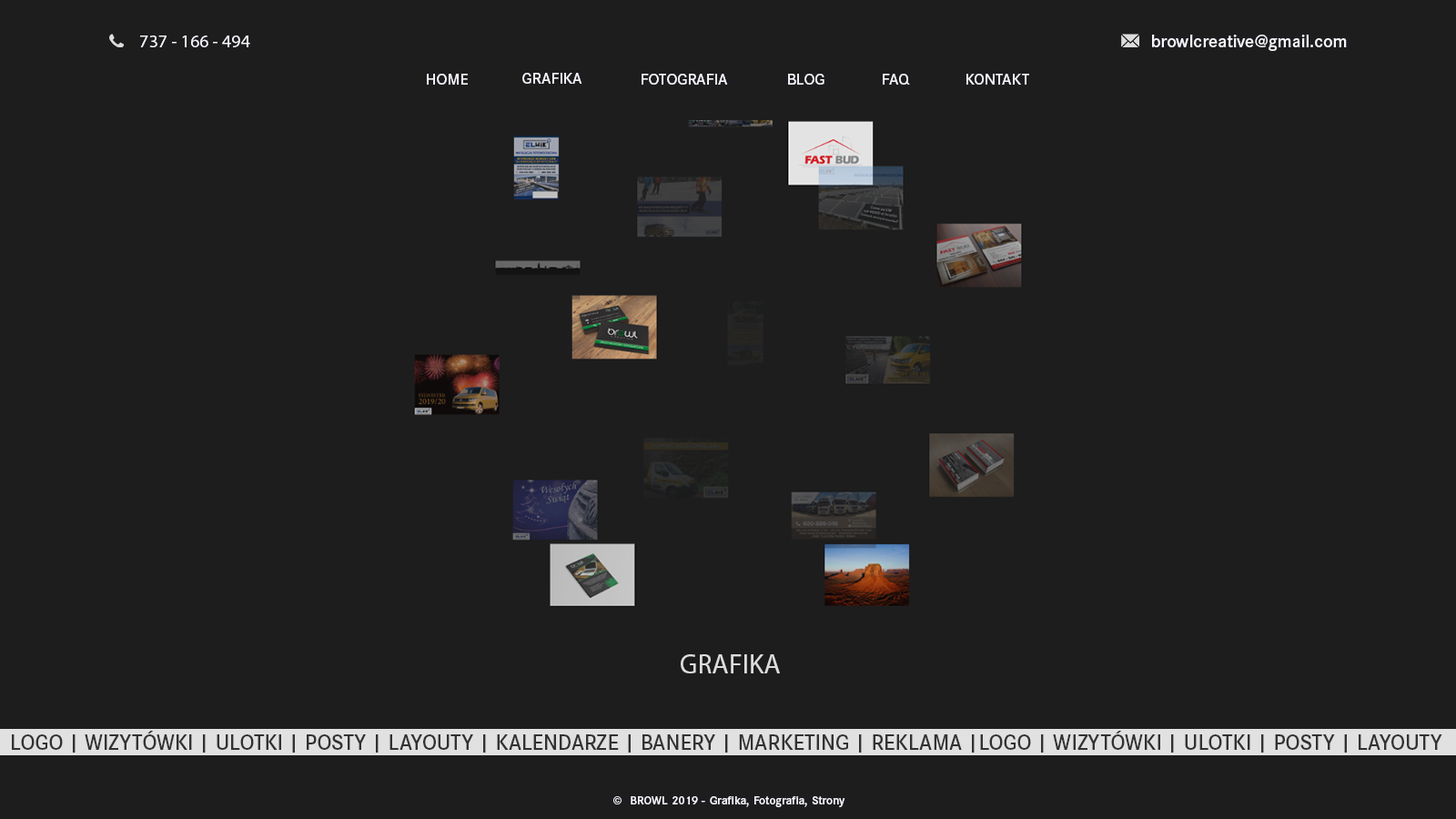
<style>
.page{position:relative;width:1456px;height:819px;background:#1d1d1e}
.page>*{position:absolute;margin:0}
.t1{font:18.2px "MyriadPro-Regular";color:#f7f7ff}
.t2{font:18.2px "CorporateSPro-Demi";color:#f7f7ff}
.t3{font:16.2px "CorporateSPro-Demi";color:#f7f7ff}
.t4{font:27.3px "MyriadPro-Regular";color:#dcdcdc}
.t5{font:21.8px "CorporateSPro-Demi";color:#333132}
.t6{font:12px "CorporateSPro-Demi";color:#f7f7ff}
</style>
<div class="page">
<p class="t1" style="left:140px;top:35px;width:110px;height:12px">737 - 166 - 494</p>
<p class="t2" style="left:1152px;top:35px;width:195px;height:16px">browlcreative@gmail.com</p>
<p class="t3" style="left:427px;top:74px;width:41px;height:11px;text-align:justify">HOME<br>v</p>
<p class="t3" style="left:522px;top:73px;width:60px;height:11px">GRAFIKA</p>
<p class="t3" style="left:642px;top:74px;width:86px;height:11px">FOTOGRAFIA</p>
<p class="t3" style="left:788px;top:74px;width:36px;height:11px">BLOG</p>
<p class="t3" style="left:883px;top:74px;width:27px;height:11px">FAQ</p>
<p class="t3" style="left:966px;top:74px;width:63px;height:11px">KONTAKT</p>
<p class="t4" style="left:681px;top:654px;width:99px;height:19px">GRAFIKA</p>
<p class="t5" style="left:12px;top:731px;width:1430px;height:22px">LOGO | WIZYTÓWKI | ULOTKI | POSTY | LAYOUTY | KALENDARZE | BANERY | MARKETING | REKLAMA |LOGO | WIZYTÓWKI | ULOTKI | POSTY | LAYOUTY</p>
<p class="t6" style="left:613px;top:796px;width:232px;height:11px;text-align:justify">©  BROWL 2019 - Grafika, Fotografia, Strony www<br>v</p>
</div>
